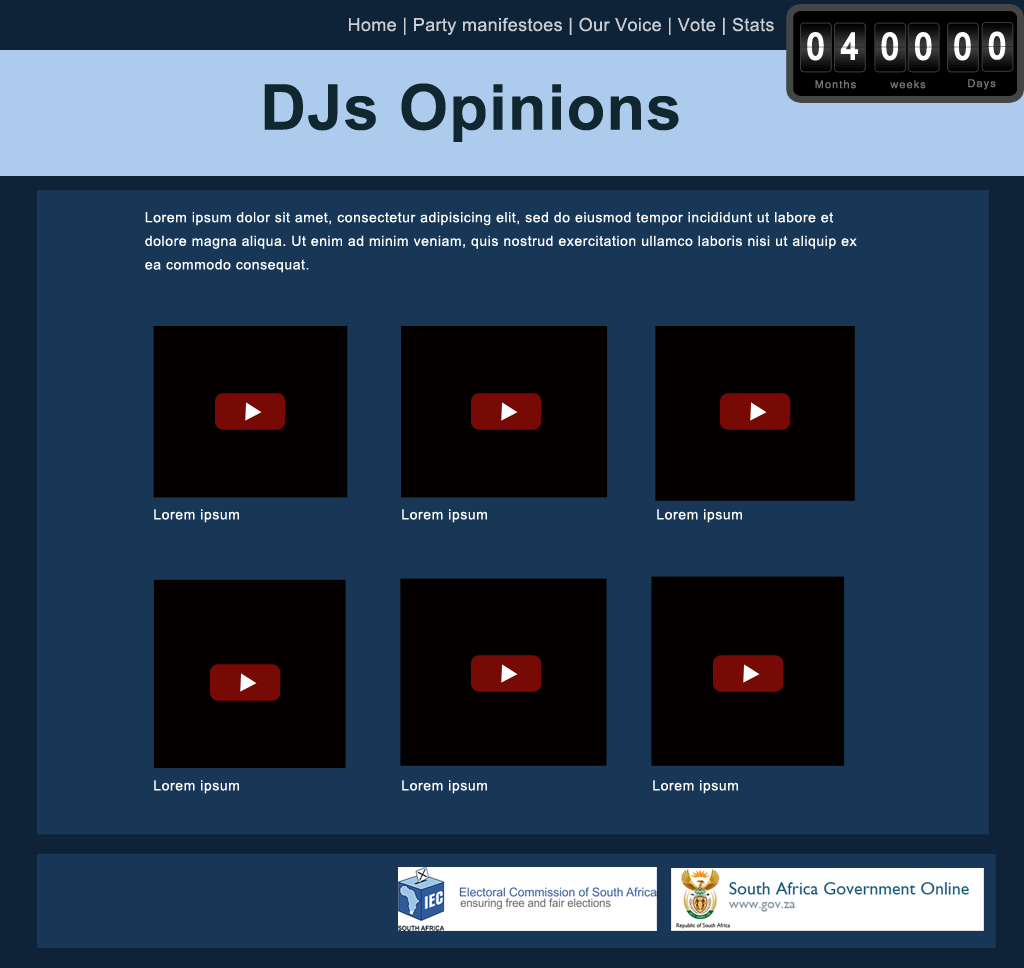
<style>
.page{position:relative;width:1024px;height:968px;background:#183757}
.page>*{position:absolute;margin:0}
.t1{font:18px "ArialMT";letter-spacing:0.02em;color:#c9ced5}
.t2{font:37.6px "Kartika-Bold";letter-spacing:0.105em;color:#ffffff;scale:0.88 1}
.t3{font:63.2px "Arial-BoldMT";letter-spacing:0.02em;color:#102730}
.t4{font:10.5px "Kartika";letter-spacing:0.105em;color:#777676}
.t5{font:14px/23.6px "ArialMT";letter-spacing:0.04em;color:#ffffff}
.t6{font:14px "ArialMT";letter-spacing:0.04em;color:#ffffff}
</style>
<div class="page">
<p class="t1" style="left:349px;top:17px;width:425px;height:18px">Home | Party manifestoes | Our Voice | Vote | Stats</p>
<p class="t2" style="left:807px;top:32px;width:17px;height:29px">0</p>
<p class="t2" style="left:840px;top:32px;width:18px;height:28px">4</p>
<p class="t2" style="left:881px;top:32px;width:17px;height:29px">0</p>
<p class="t2" style="left:915px;top:32px;width:17px;height:29px">0</p>
<p class="t2" style="left:954px;top:32px;width:17px;height:29px">0</p>
<p class="t2" style="left:988px;top:31px;width:18px;height:29px">0</p>
<p class="t3" style="left:264px;top:83px;width:415px;height:59px">DJs Opinions</p>
<p class="t4" style="left:815px;top:80px;width:41px;height:9px">Months</p>
<p class="t4" style="left:890px;top:80px;width:36px;height:9px">weeks</p>
<p class="t4" style="left:968px;top:79px;width:28px;height:11px">Days</p>
<p class="t5" style="left:145px;top:212px;width:712px;height:61px">Lorem ipsum dolor sit amet, consectetur adipisicing elit, sed do eiusmod tempor incididunt ut labore et dolore magna aliqua. Ut enim ad minim veniam, quis nostrud exercitation ullamco laboris nisi ut aliquip ex ea commodo consequat.</p>
<p class="t6" style="left:154px;top:509px;width:85px;height:14px">Lorem ipsum</p>
<p class="t6" style="left:402px;top:509px;width:85px;height:14px">Lorem ipsum</p>
<p class="t6" style="left:657px;top:509px;width:85px;height:14px">Lorem ipsum</p>
<p class="t6" style="left:154px;top:780px;width:85px;height:14px">Lorem ipsum</p>
<p class="t6" style="left:402px;top:780px;width:85px;height:14px">Lorem ipsum</p>
<p class="t6" style="left:653px;top:780px;width:85px;height:14px">Lorem ipsum</p>
</div>
